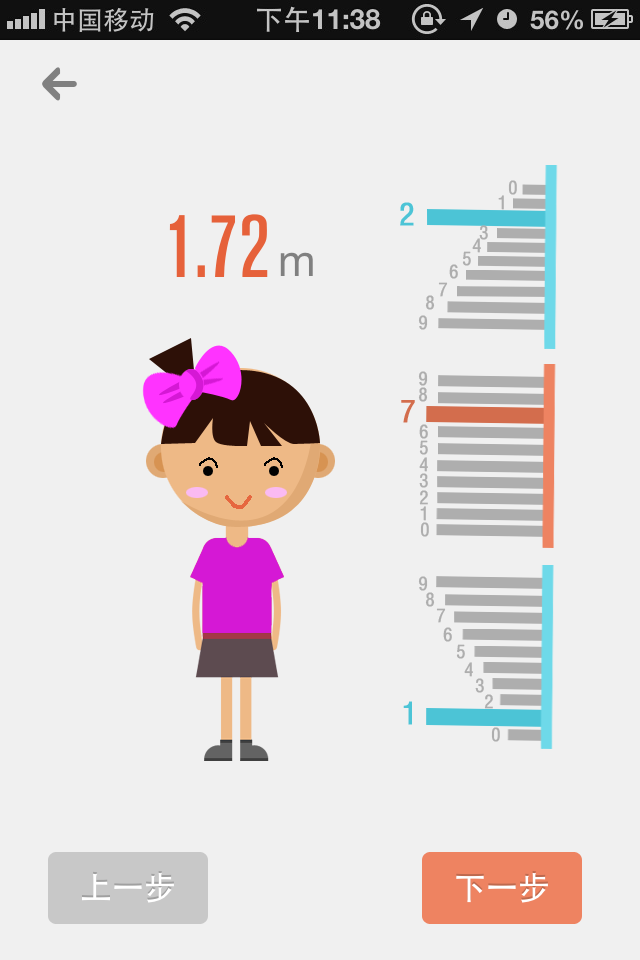
<style>
.page{position:relative;width:640px;height:960px;background:#f0f0f0}
.page>*{position:absolute;margin:0}
.t1{font:18px "CAJ-FNT4A";color:#aeaeae;font-weight:bold}
.t2{font:30px "CAJ-FNT4A";color:#4cc4d6;font-weight:bold}
.t3{font:30px "CAJ-FNT4A";color:#d36d4d;font-weight:bold}
</style>
<div class="page">
<p class="t1" style="left:508px;top:180px;width:9px;height:15px">0</p>
<p class="t1" style="left:498px;top:195px;width:6px;height:15px">1</p>
<p class="t2" style="left:400px;top:202px;width:14px;height:24px">2</p>
<p class="t1" style="left:479px;top:225px;width:9px;height:15px">3</p>
<p class="t1" style="left:472px;top:238px;width:9px;height:15px">4</p>
<p class="t1" style="left:462px;top:251px;width:9px;height:15px">5</p>
<p class="t1" style="left:449px;top:264px;width:9px;height:15px">6</p>
<p class="t1" style="left:438px;top:282px;width:10px;height:15px">7</p>
<p class="t1" style="left:425px;top:295px;width:10px;height:15px">8</p>
<p class="t1" style="left:418px;top:315px;width:10px;height:15px">9</p>
<p class="t1" style="left:418px;top:371px;width:10px;height:15px">9</p>
<p class="t1" style="left:418px;top:387px;width:10px;height:15px">8</p>
<p class="t3" style="left:401px;top:400px;width:14px;height:23px">7</p>
<p class="t1" style="left:419px;top:424px;width:9px;height:15px">6</p>
<p class="t1" style="left:419px;top:440px;width:9px;height:15px">5</p>
<p class="t1" style="left:419px;top:457px;width:9px;height:15px">4</p>
<p class="t1" style="left:419px;top:473px;width:9px;height:15px">3</p>
<p class="t1" style="left:419px;top:490px;width:9px;height:15px">2</p>
<p class="t1" style="left:420px;top:506px;width:6px;height:15px">1</p>
<p class="t1" style="left:420px;top:522px;width:9px;height:15px">0</p>
<p class="t1" style="left:418px;top:576px;width:10px;height:15px">9</p>
<p class="t1" style="left:425px;top:592px;width:10px;height:15px">8</p>
<p class="t1" style="left:436px;top:608px;width:10px;height:15px">7</p>
<p class="t1" style="left:443px;top:627px;width:9px;height:15px">6</p>
<p class="t1" style="left:456px;top:644px;width:9px;height:15px">5</p>
<p class="t1" style="left:464px;top:662px;width:9px;height:15px">4</p>
<p class="t1" style="left:475px;top:678px;width:9px;height:15px">3</p>
<p class="t2" style="left:403px;top:701px;width:9px;height:24px">1</p>
<p class="t1" style="left:484px;top:694px;width:9px;height:15px">2</p>
<p class="t1" style="left:491px;top:727px;width:9px;height:15px">0</p>
</div>
